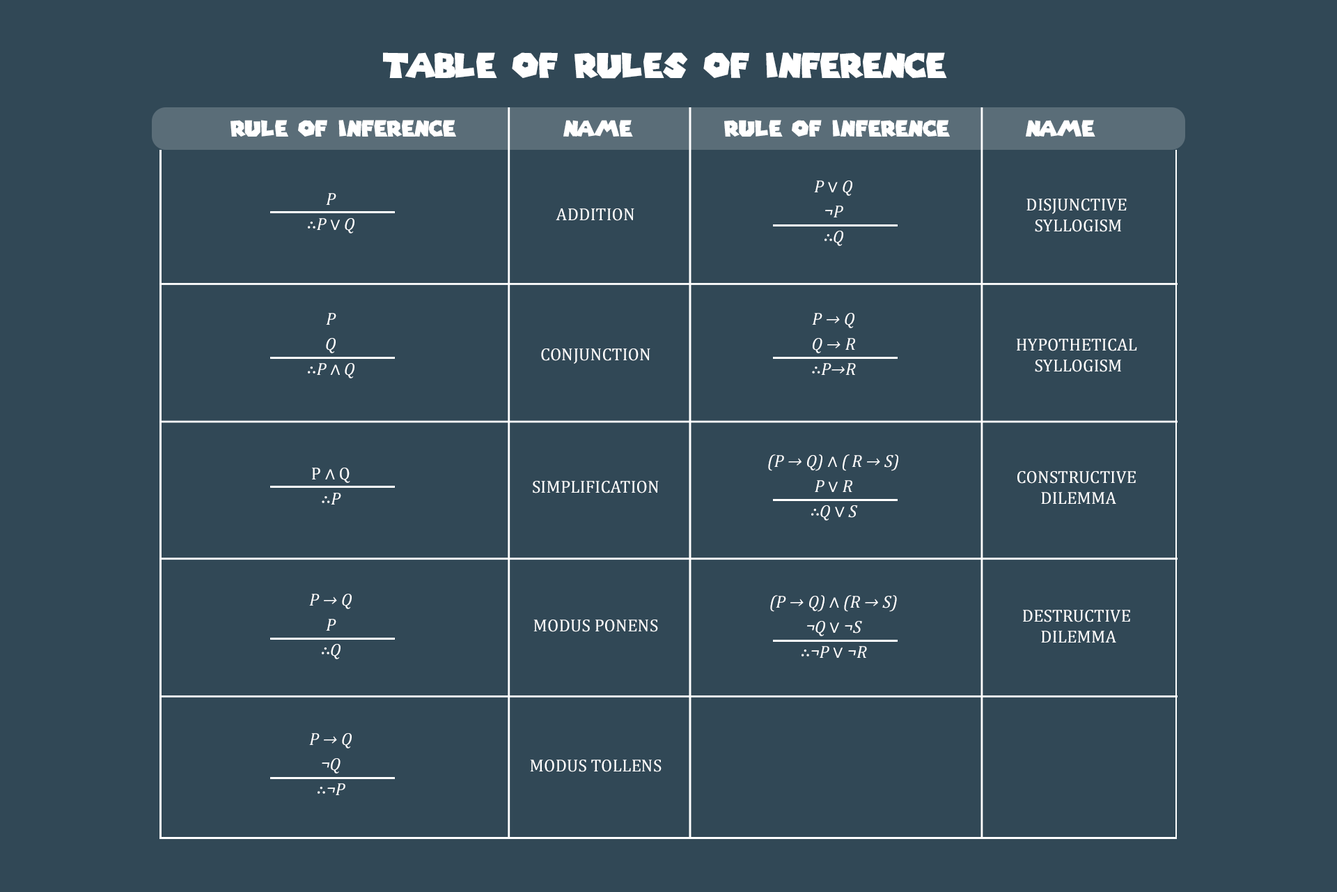
<style>
.page{position:relative;width:1337px;height:892px;background:#314856}
.page>*{position:absolute;margin:0}
.t1{font:34px "SuperMarioGalaxy";color:#ffffff}
.t2{font:21.9px "SuperMarioGalaxy";color:#ffffff}
.t3{font:17.6px/25.1px "Cambria-Italic";color:#ffffff}
.t4{font:17.6px/25.1px "Cambria";color:#ffffff}
.t5{font:17.5px/25.1px "Cambria-Italic";color:#ffffff}
.t6{font:17.5px/25.1px "Cambria";color:#ffffff}
.t7{font:17.5px "Cambria";color:#ffffff;text-transform:uppercase}
.t8{font:17.5px/20.9px "Cambria";color:#ffffff;text-transform:uppercase}
</style>
<div class="page">
<p class="t1" style="left:383px;top:52px;width:564px;height:27px">table of rules of inference</p>
<p class="t2" style="left:231px;top:120px;width:225px;height:17px">RULE OF INFERENCE</p>
<p class="t2" style="left:564px;top:120px;width:69px;height:17px">NAME</p>
<p class="t2" style="left:724px;top:120px;width:226px;height:17px">RULE OF INFERENCE</p>
<p class="t2" style="left:1026px;top:120px;width:70px;height:17px">NAME</p>
<p class="t3" style="left:814px;top:180px;width:39px;height:66px;text-align:center">P <span class="t4">∨</span> Q<br>¬P<br><span class="t4">∴</span>Q</p>
<p class="t5" style="left:308px;top:193px;width:47px;height:40px;text-align:center">P<br><span class="t6">∴</span>P <span class="t6">∨ </span>Q</p>
<p class="t7" style="left:556px;top:208px;width:79px;height:13px">Addition</p>
<p class="t8" style="left:1027px;top:199px;width:100px;height:33px;text-align:center">Disjunctive <br>Syllogism</p>
<p class="t5" style="left:308px;top:313px;width:47px;height:65px;text-align:center">P<br>Q<br><span class="t6">∴</span>P <span class="t6">∧ </span>Q</p>
<p class="t5" style="left:812px;top:313px;width:44px;height:62px;text-align:center">P → Q<br>Q → R<br><span class="t6">∴</span>P→R</p>
<p class="t8" style="left:1017px;top:339px;width:120px;height:33px;text-align:center">Hypothetical <br>Syllogism</p>
<p class="t7" style="left:541px;top:348px;width:110px;height:16px">Conjunction</p>
<p class="t5" style="left:768px;top:454px;width:131px;height:66px;text-align:center">(P → Q) <span class="t6">∧ </span>( R → S)<br>P <span class="t6">∨ </span>R<br><span class="t6">∴</span>Q <span class="t6">∨ </span>S</p>
<p class="t6" style="left:312px;top:467px;width:38px;height:37px;text-align:center">P ∧ Q<br>∴<span class="t5">P</span></p>
<p class="t8" style="left:1018px;top:471px;width:118px;height:33px;text-align:center">Constructive <br>Dilemma</p>
<p class="t7" style="left:533px;top:481px;width:126px;height:12px">Simplification</p>
<p class="t5" style="left:309px;top:593px;width:43px;height:66px;text-align:center">P → Q<br>P<br><span class="t6">∴</span>Q</p>
<p class="t5" style="left:770px;top:595px;width:127px;height:63px;text-align:center">(P → Q) <span class="t6">∧ </span>(R → S)<br>¬Q <span class="t6">∨ </span>¬S<br><span class="t6">∴</span>¬P <span class="t6">∨ </span>¬R</p>
<p class="t8" style="left:1023px;top:609px;width:108px;height:33px;text-align:center">Destructive <br>Dilemma</p>
<p class="t7" style="left:534px;top:619px;width:124px;height:13px">Modus Ponens</p>
<p class="t5" style="left:309px;top:733px;width:43px;height:62px;text-align:center">P → Q<br>¬Q<br><span class="t6">∴</span>¬P</p>
<p class="t7" style="left:530px;top:759px;width:132px;height:13px">Modus Tollens</p>
</div>
